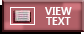
<style>
.page{position:relative;width:84px;height:34px;background:#b16067}
.page>*{position:absolute;margin:0}
.t1{font:11px/10px "SegoeUI-SemiBold";color:#ffffff}
</style>
<div class="page">
<p class="t1" style="left:45px;top:7px;width:27px;height:18px;text-align:center">VIEW<br>TEXT</p>
</div>
